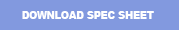
<style>
.page{position:relative;width:179px;height:30px;background:#8299df}
.page>*{position:absolute;margin:0}
.t1{font:18.2px "Arial-Black";color:#ffffff;scale:0.9 1}
</style>
<div class="page">
<p class="t1" style="left:22px;top:11px;width:132px;height:8px">DOWNLOAD SPEC SHEET</p>
</div>
